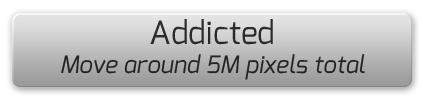
<style>
.page{position:relative;width:425px;height:100px}
.page>*{position:absolute;margin:0}
.t1{font:24px "Exo-Italic";color:#242424}
.t2{font:32px "Exo-Regular";color:#242424}
</style>
<div class="page">
<p class="t1" style="left:61px;top:19px;width:304px;height:61px;text-align:center"><span class="t2">Addicted<br></span>Move around 5M pixels total</p>
</div>
